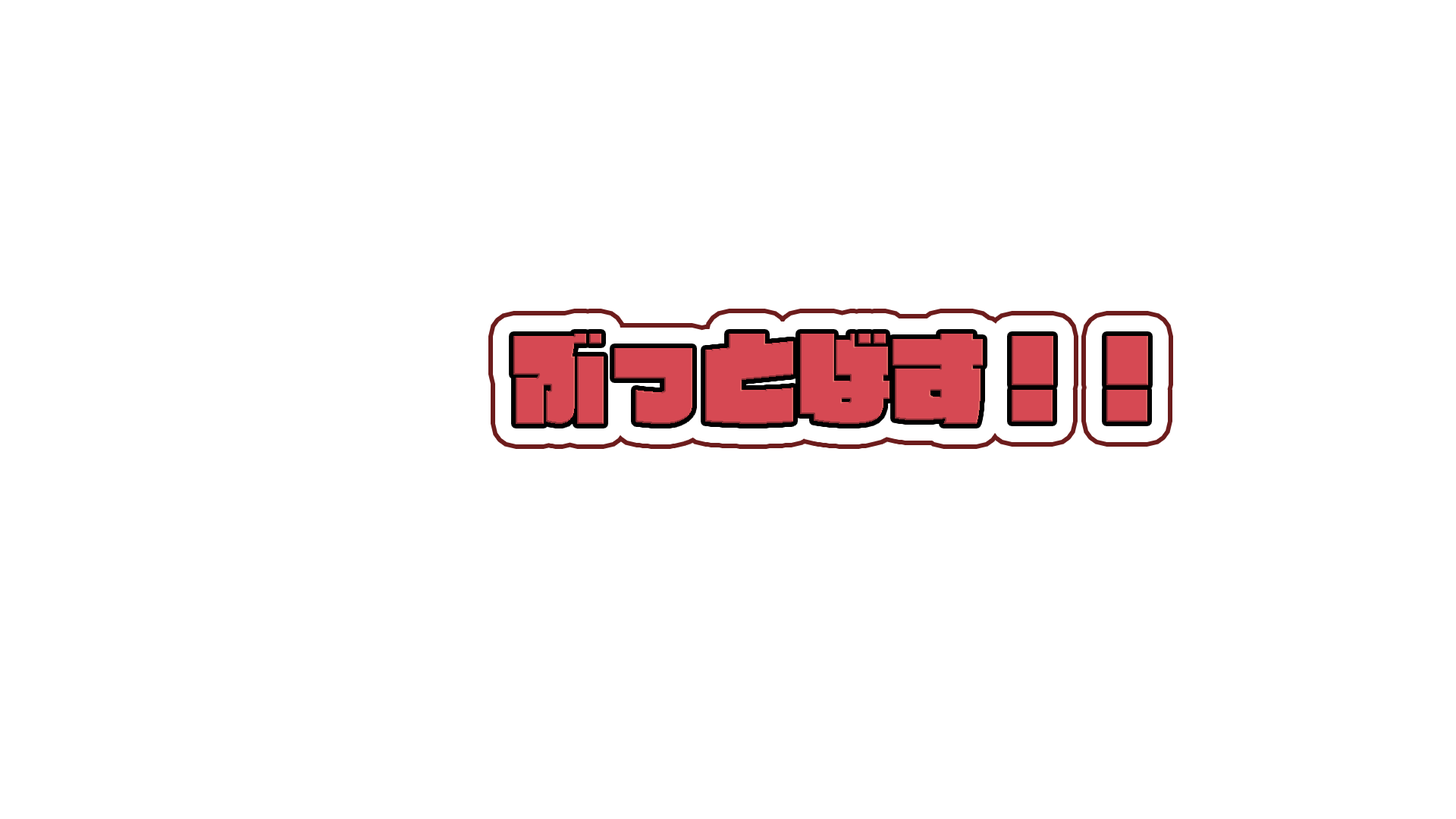
<style>
.page{position:relative;width:1456px;height:819px;background:#ffffff}
.page>*{position:absolute;margin:0}
.t1{font:94.8px "FZGonta-kana";color:#d64953}
</style>
<div class="page">
<p class="t1" style="left:513px;top:334px;width:635px;height:90px">ぶっとばす！！</p>
</div>
